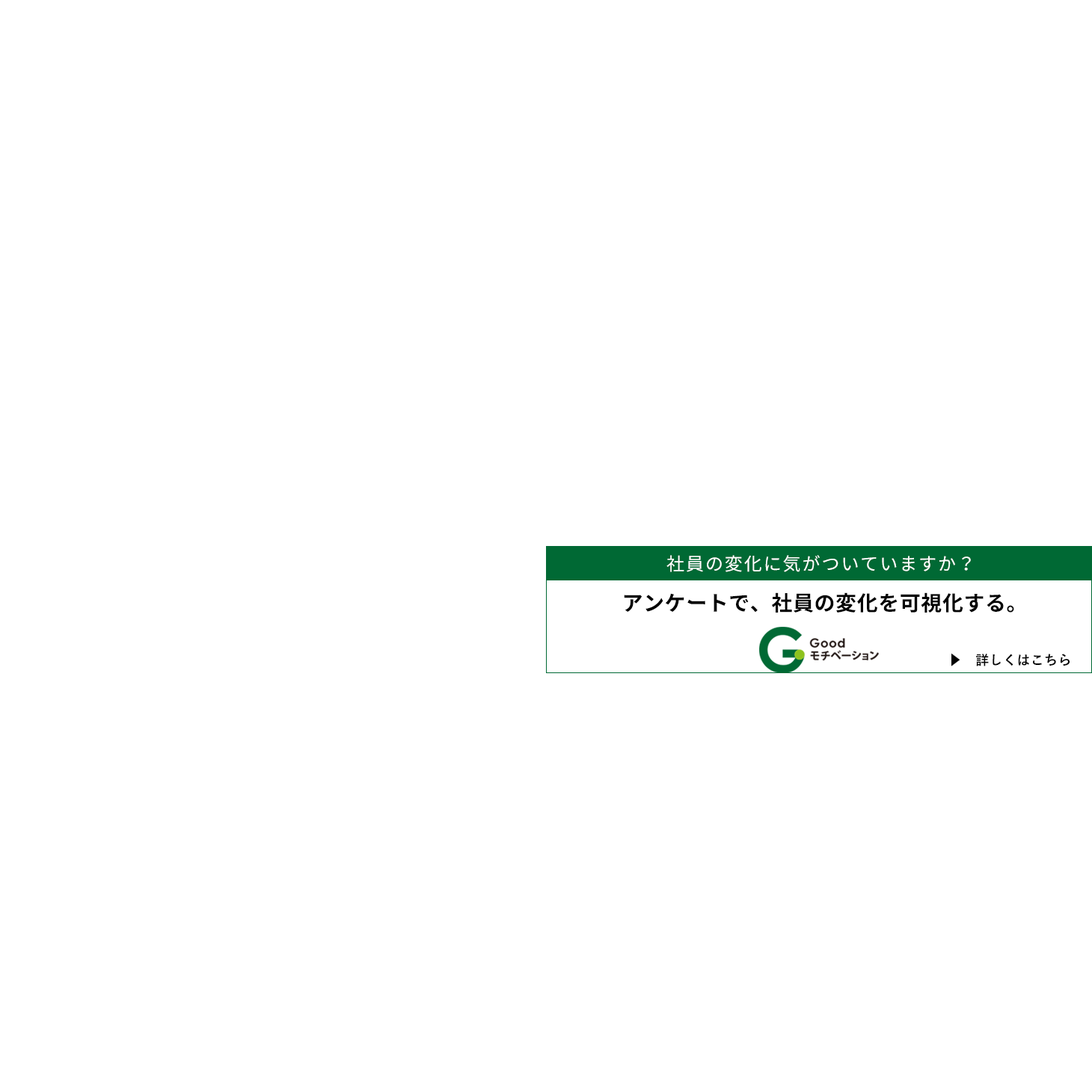
<style>
.page{position:relative;width:1092px;height:1092px;background:#ffffff}
.page>*{position:absolute;margin:0}
.t1{font:18px "Nasu-Regular";letter-spacing:0.08em;color:#ffffff}
.t2{font:20.9px "Nasu-Bold";letter-spacing:0.02em;color:#020202}
.t3{font:13.5px "YuGothic-Bold";letter-spacing:0.02em;color:#020202}
.t4{font:13.5px "KozGoPr6N-Regular";letter-spacing:0.02em;color:#020202}
</style>
<div class="page">
<p class="t1" style="left:666px;top:555px;width:305px;height:17px">社員の変化に気がついていますか？</p>
<p class="t2" style="left:624px;top:592px;width:390px;height:21px">アンケートで、社員の変化を可視化する。</p>
<p class="t3" style="left:951px;top:653px;width:119px;height:13px"><span class="t4">▶　</span>詳しくはこちら</p>
</div>
